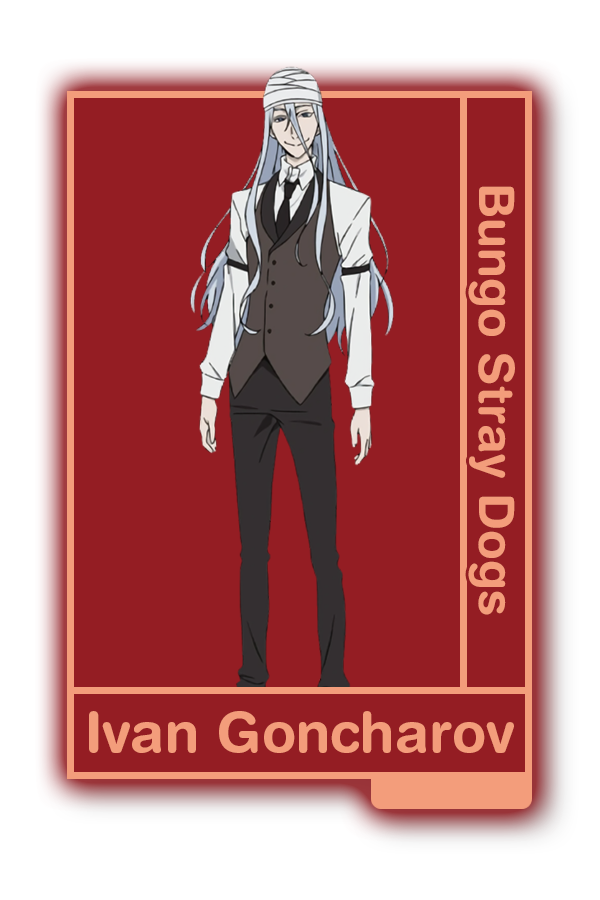
<style>
.page{position:relative;width:600px;height:900px;background:#941d23}
.page>*{position:absolute;margin:0}
.t1{font:48.8px "HelveticaRounded-Bold";color:#f39d7b}
.t2{font:56px "HelveticaRounded-Bold";color:#f39d7b}
</style>
<div class="page">
<p class="t1" style="left:468px;top:186px;width:47px;height:429px;rotate:90deg">Bungo Stray Dogs</p>
<p class="t2" style="left:89px;top:711px;width:425px;height:42px">Ivan Goncharov</p>
</div>
